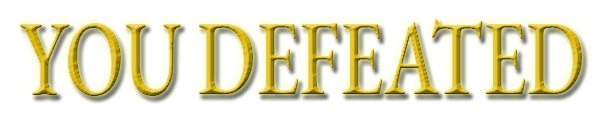
<style>
.page{position:relative;width:600px;height:125px;background:#ffffff}
.page>*{position:absolute;margin:0}
.t1{font:105.6px "EBGaramond-Medium";scale:0.73 1}
</style>
<div class="page">
<p class="t1" style="left:20px;top:19px;width:562px;height:77px">YOU DEFEATED</p>
</div>
